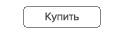
<style>
.page{position:relative;width:125px;height:34px;background:#ffffff}
.page>*{position:absolute;margin:0}
.t1{font:11px "ProximaNova-Regular";color:#494849}
</style>
<div class="page">
<p class="t1" style="left:45px;top:12px;width:34px;height:11px">Купить</p>
</div>
